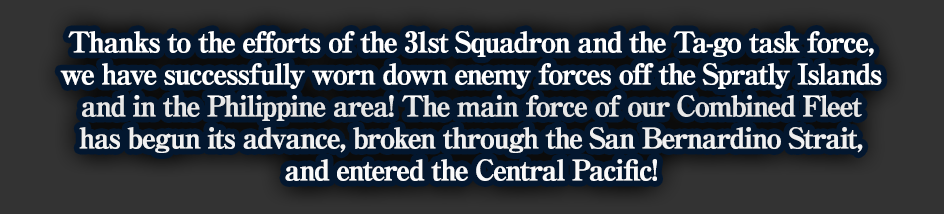
<style>
.page{position:relative;width:944px;height:214px;background:#03172f}
.page>*{position:absolute;margin:0}
.t1{font:28px/32px "RyuminPro-ExBold";letter-spacing:-0.08em;color:#ffffff;font-weight:bold}
</style>
<div class="page">
<p class="t1" style="left:60px;top:31px;width:822px;height:150px;text-align:center">Thanks to the efforts of the 31st Squadron and the Ta-go task force,<br>we have successfully worn down enemy forces off the Spratly Islands<br>and in the Philippine area! The main force of our Combined Fleet<br>has begun its advance, broken through the San Bernardino Strait,<br>and entered the Central Pacific!</p>
</div>
